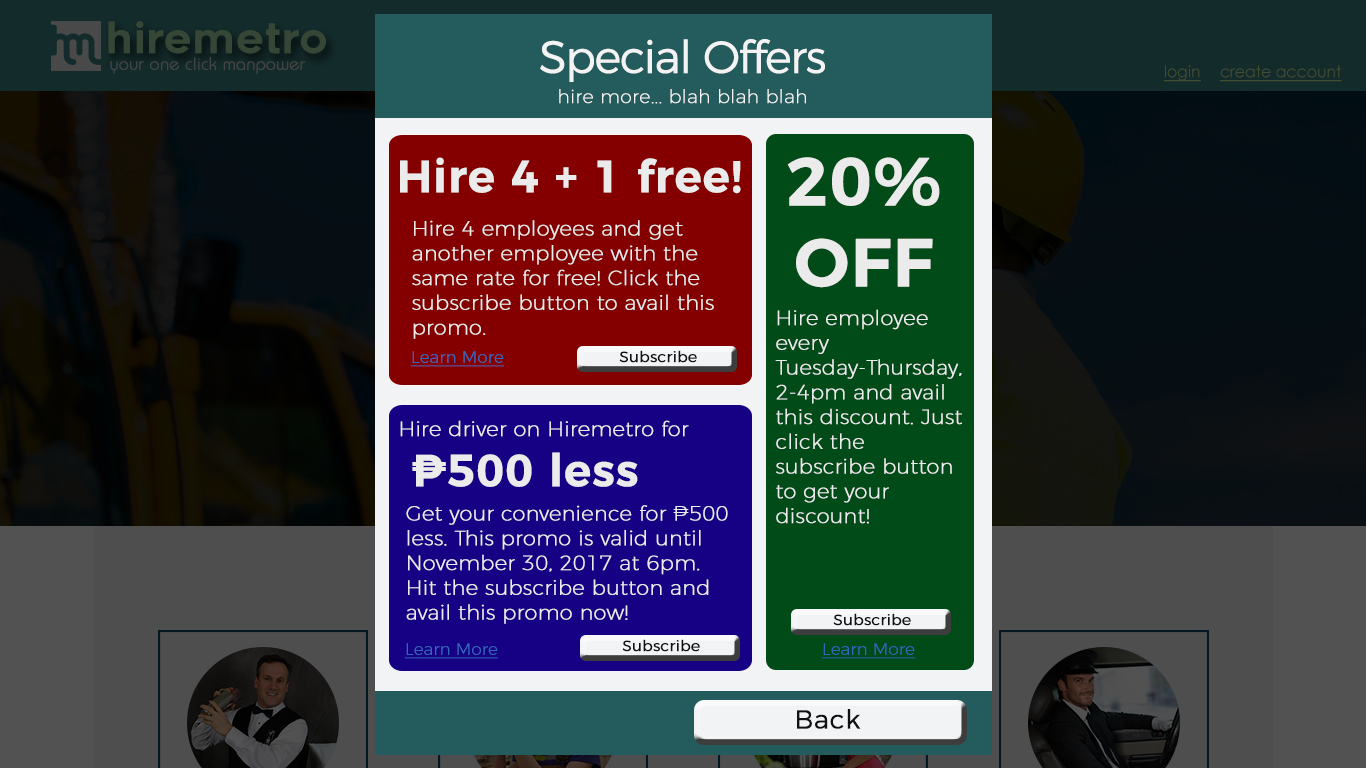
<style>
.page{position:relative;width:1366px;height:768px}
.page>*{position:absolute;margin:0}
.t1{font:45.2px "Montserrat-Light";letter-spacing:-0.055em;color:#f3f3f3;font-weight:bold}
.t2{font:18.8px "Montserrat-ExtraLight";color:#f3f3f3;font-weight:bold}
.t3{font:45px "Montserrat-SemiBold";color:#ebebeb;font-weight:bold}
.t4{font:67.5px "Montserrat-SemiBold";color:#ebebeb;font-weight:bold}
.t5{font:20.6px "Montserrat-ExtraLight";color:#ebebeb;font-weight:bold}
.t6{font:16.9px "Montserrat-Light";color:#3366bb;text-decoration:underline}
.t7{font:15.2px "Montserrat-Light";color:#111111;font-weight:bold}
.t8{font:26.2px "Montserrat-Light";color:#111111;font-weight:bold}
</style>
<div class="page">
<p class="t1" style="left:540px;top:39px;width:285px;height:43px">Special Offers</p>
<p class="t2" style="left:559px;top:89px;width:247px;height:15px">hire more... blah blah blah</p>
<p class="t3" style="left:400px;top:157px;width:341px;height:37px">Hire 4 + 1 free!</p>
<p class="t4" style="left:787px;top:157px;width:153px;height:131px;text-align:center">20%<br>OFF</p>
<p class="t5" style="left:412px;top:220px;width:302px;height:119px">Hire 4 employees and get another employee with the same rate for free! Click the subscribe button to avail this promo.</p>
<p class="t5" style="left:775px;top:309px;width:187px;height:215px">Hire employee every Tuesday-Thursday, 2-4pm and avail this discount. Just click the subscribe button to get your discount!</p>
<p class="t6" style="left:410px;top:351px;width:94px;height:16px">Learn More</p>
<p class="t7" style="left:619px;top:350px;width:78px;height:13px">Subscribe</p>
<p class="t5" style="left:400px;top:420px;width:289px;height:17px">Hire driver on Hiremetro for</p>
<p class="t3" style="left:412px;top:452px;width:226px;height:35px">₱500 less</p>
<p class="t5" style="left:406px;top:505px;width:322px;height:119px">Get your convenience for ₱500 less. This promo is valid until November 30, 2017 at 6pm. Hit the subscribe button and avail this promo now!</p>
<p class="t7" style="left:833px;top:613px;width:78px;height:13px">Subscribe</p>
<p class="t7" style="left:622px;top:639px;width:78px;height:13px">Subscribe</p>
<p class="t6" style="left:404px;top:643px;width:94px;height:16px">Learn More</p>
<p class="t6" style="left:821px;top:643px;width:94px;height:16px">Learn More</p>
<p class="t8" style="left:797px;top:709px;width:64px;height:20px">Back</p>
</div>
